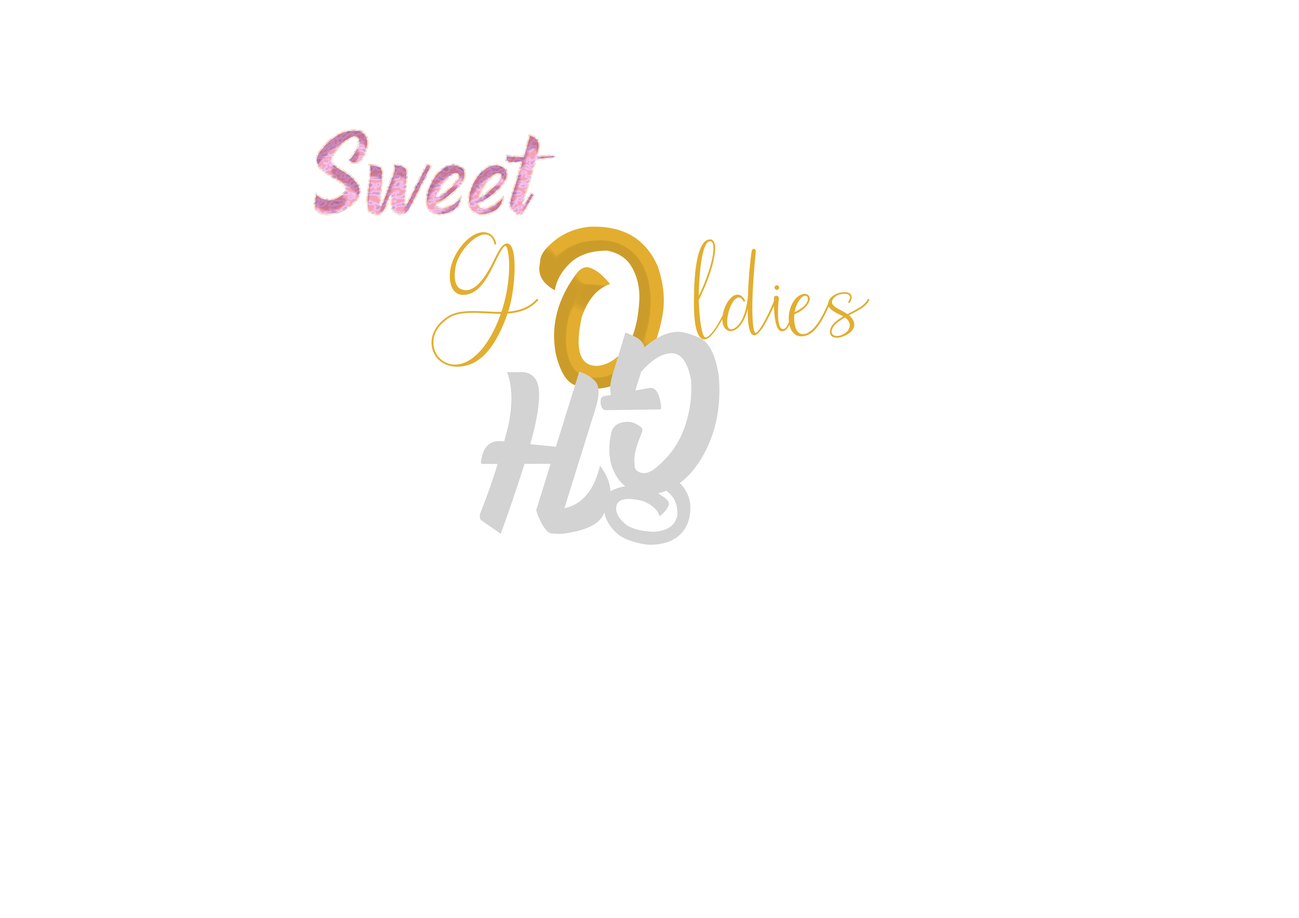
<style>
.page{position:relative;width:1299px;height:918px;background:#ffffff}
.page>*{position:absolute;margin:0}
.t1{font:123.4px "Raphtalia"}
.t2{font:123.4px "BellyBetty";color:#e3ae2f}
.t3{font:231.4px "Raphtalia";color:#e3ae2f}
.t4{font:231.4px "Raphtalia";color:#d3d3d3}
.t5{font:123.4px "Raphtalia";color:#d3d3d3}
</style>
<div class="page">
<p class="t1" style="left:314px;top:129px;width:242px;height:86px">Sweet</p>
<p class="t2" style="left:431px;top:232px;width:438px;height:135px">G    ldies</p>
<p class="t3" style="left:539px;top:227px;width:125px;height:162px">O</p>
<p class="t4" style="left:600px;top:332px;width:119px;height:163px;rotate:179deg">G</p>
<p class="t4" style="left:479px;top:372px;width:131px;height:162px;rotate:180deg">H</p>
<p class="t5" style="left:603px;top:478px;width:87px;height:67px;rotate:91deg">O</p>
</div>
